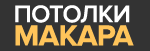
<style>
.page{position:relative;width:150px;height:51px;background:#333333}
.page>*{position:absolute;margin:0}
.t1{font:25px "ProximaNova-Semibold";letter-spacing:-0.02em;color:#ffffff}
.t2{font:30px "ProximaNova-Bold";letter-spacing:-0.02em;color:#ffc45a}
</style>
<div class="page">
<p class="t1" style="left:15px;top:5px;width:115px;height:18px">ПОТОЛКИ</p>
<p class="t2" style="left:15px;top:25px;width:119px;height:21px">МАКАРА</p>
</div>
